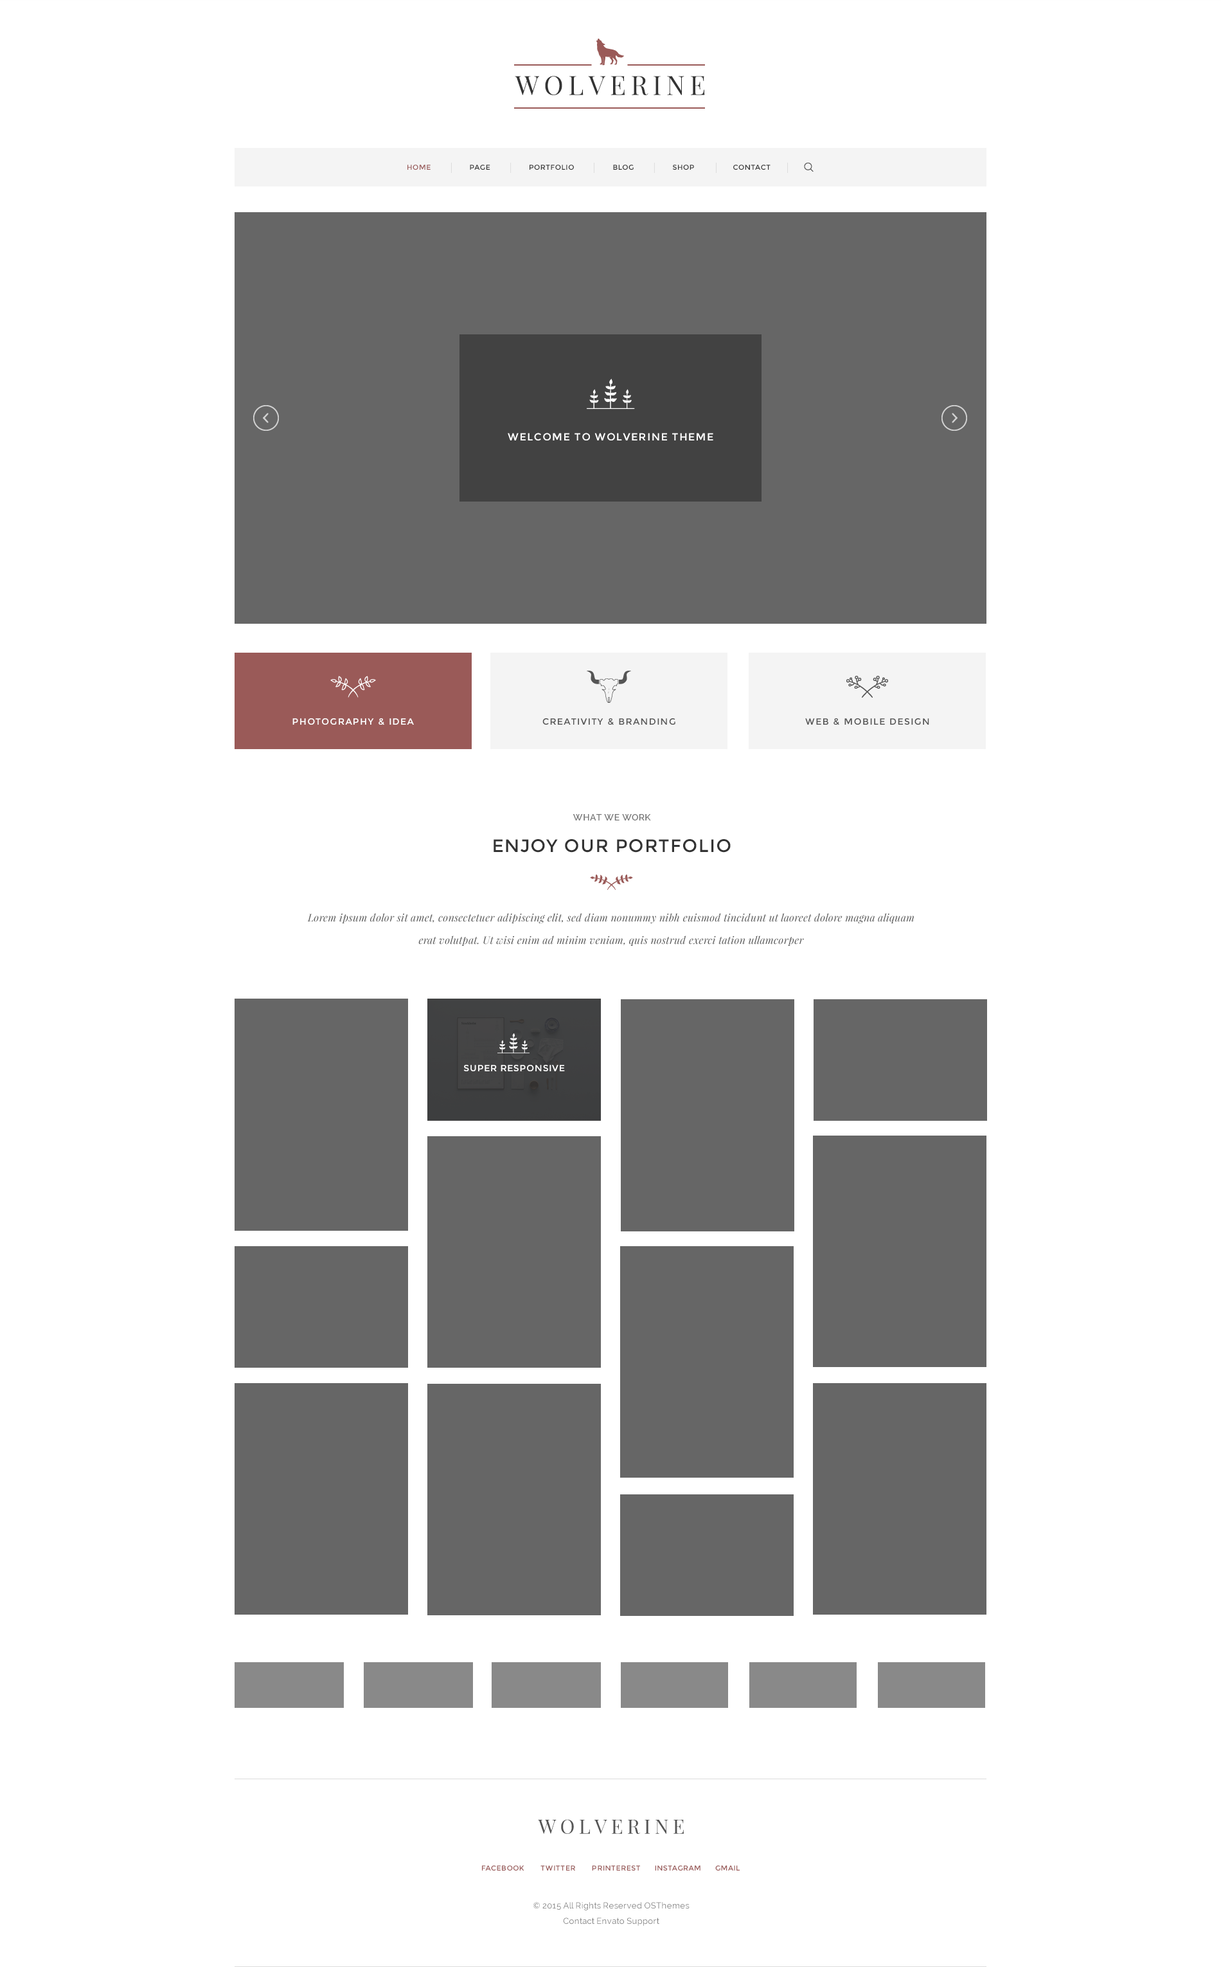
<style>
.page{position:relative;width:1221px;height:1967px;background:#ffffff}
.page>*{position:absolute;margin:0}
.t1{font:26.5px "PlayfairDisplay-Regular";letter-spacing:0.1em;color:#333333}
.t2{font:7.1px "Montserrat-Regular";letter-spacing:0.05em;color:#333333}
.t3{font:7.1px "Montserrat-Regular";letter-spacing:0.05em;color:#995958}
.t4{font:10.3px "Montserrat-Regular";letter-spacing:0.1em;color:#ffffff}
.t5{font:9px "Montserrat-Regular";letter-spacing:0.1em;color:#ffffff}
.t6{font:9px "Montserrat-Regular";letter-spacing:0.1em;color:#555555}
.t7{font:9px "Montserrat-Regular";letter-spacing:0.1em;color:#545454}
.t8{font:9px "Raleway-SemiBold";letter-spacing:0.05em;color:#777777}
.t9{font:18px "Montserrat-Regular";letter-spacing:0.05em;color:#333333}
.t10{font:10.3px/22.6px "PlayfairDisplay-Italic";letter-spacing:0.02em;color:#545454}
.t11{font:9px "Montserrat-Regular";letter-spacing:0.05em;color:#ffffff}
.t12{font:19.9px "PlayfairDisplay-Regular";letter-spacing:0.1em;color:#555555}
.t13{font:8.4px/15px "Raleway";letter-spacing:0.02em;color:#777777}
</style>
<div class="page">
<p class="t1" style="left:515px;top:76px;width:190px;height:19px">WOLVERINE</p>
<p class="t2" style="left:408px;top:165px;width:363px;height:5px"><span class="t3">HOME          </span>PAGE          PORTFOLIO          BLOG          SHOP          CONTACT</p>
<p class="t4" style="left:508px;top:433px;width:206px;height:8px">WELCOME TO WOLVERINE THEME</p>
<p class="t5" style="left:292px;top:718px;width:122px;height:7px">PHOTOGRAPHY &amp; IDEA</p>
<p class="t6" style="left:543px;top:718px;width:133px;height:7px">CREATIVITY &amp; BRANDING</p>
<p class="t7" style="left:806px;top:718px;width:124px;height:7px">WEB &amp; MOBILE DESIGN</p>
<p class="t8" style="left:573px;top:814px;width:78px;height:6px">WHAT WE WORK</p>
<p class="t9" style="left:494px;top:839px;width:237px;height:13px">ENJOY OUR PORTFOLIO</p>
<p class="t10" style="left:307px;top:913px;width:608px;height:33px;text-align:center">Lorem ipsum dolor sit amet, consectetuer adipiscing elit, sed diam nonummy nibh euismod tincidunt ut laoreet dolore magna aliquam erat volutpat. Ut wisi enim ad minim veniam, quis nostrud exerci tation ullamcorper</p>
<p class="t11" style="left:464px;top:1065px;width:101px;height:6px">SUPER RESPONSIVE</p>
<p class="t12" style="left:538px;top:1819px;width:146px;height:14px">WOLVERINE</p>
<p class="t3" style="left:482px;top:1865px;width:258px;height:5px">FACEBOOK       TWITTER       PRINTEREST      INSTAGRAM      GMAIL</p>
<p class="t13" style="left:534px;top:1902px;width:156px;height:23px;text-align:center">© 2015 All Rights Reserved OSThemes<br>Contact Envato Support</p>
</div>
